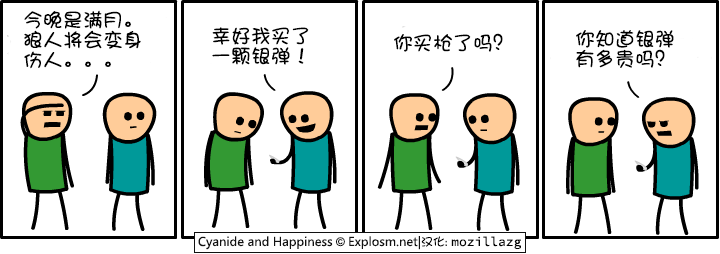
<style>
.page{position:relative;width:720px;height:254px;background:#ffffff}
.page>*{position:absolute;margin:0}
.t1{font:20px/20px "DFShaoNvW5";color:#000000}
.t2{font:20px "DFShaoNvW5";color:#000000}
</style>
<div class="page">
<p class="t1" style="left:24px;top:10px;width:117px;height:59px">今晚是满月。<br>狼人将会变身<br>伤人。。。</p>
<p class="t1" style="left:212px;top:27px;width:97px;height:38px">幸好我买了<br>一颗银弹！</p>
<p class="t1" style="left:576px;top:30px;width:98px;height:38px">你知道银弹<br>有多贵吗？</p>
<p class="t2" style="left:394px;top:33px;width:109px;height:19px">你买枪了吗？</p>
</div>
